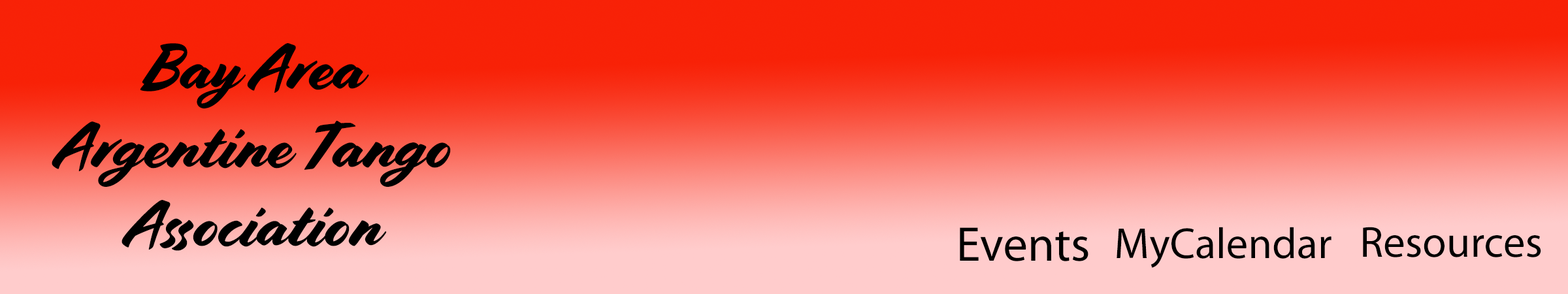
<style>
.page{position:relative;width:1568px;height:294px}
.page>*{position:absolute;margin:0}
.t1{font:65.3px "Cortado";color:#000000}
.t2{font:49px "MyriadPro-Regular";color:#000000}
.t3{font:43.6px "MyriadPro-Regular";color:#000000}
</style>
<div class="page">
<p class="t1" style="left:52px;top:43px;width:399px;height:208px;text-align:center">Bay Area<br>Argentine Tango<br>Association</p>
<p class="t2" style="left:960px;top:227px;width:128px;height:34px">Events</p>
<p class="t3" style="left:1117px;top:227px;width:214px;height:41px">MyCalendar</p>
<p class="t3" style="left:1363px;top:227px;width:178px;height:30px">Resources</p>
</div>
